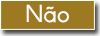
<style>
.page{position:relative;width:100px;height:36px;background:#9d7922}
.page>*{position:absolute;margin:0}
.t1{font:24px "Arcon-Regular";color:#ffffff}
</style>
<div class="page">
<p class="t1" style="left:26px;top:4px;width:43px;height:19px">Não</p>
</div>
